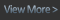
<style>
.page{position:relative;width:60px;height:20px;background:#333333}
.page>*{position:absolute;margin:0}
.t1{font:11.9px "Calibri";letter-spacing:-0.04em;color:#576a7b;scale:0.94 1}
</style>
<div class="page">
<p class="t1" style="left:4px;top:5px;width:54px;height:9px">View More &gt;</p>
</div>
